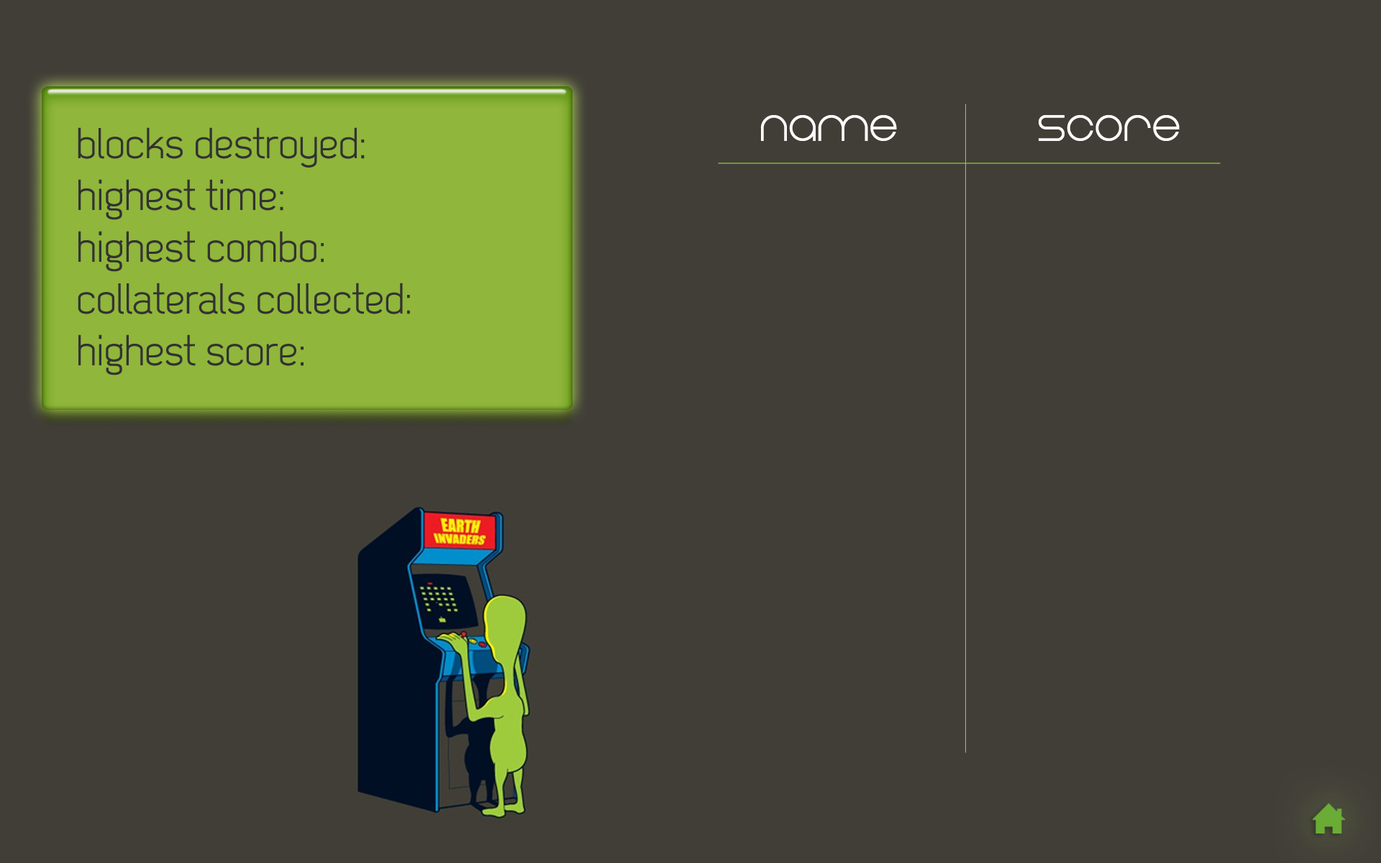
<style>
.page{position:relative;width:1381px;height:863px;background:#413e37}
.page>*{position:absolute;margin:0}
.t1{font:51.8px "EightOne";letter-spacing:-0.005em;color:#fefefe}
.t2{font:43.2px "Dekar";letter-spacing:-0.005em;color:#323232}
</style>
<div class="page">
<p class="t1" style="left:760px;top:115px;width:137px;height:26px">Name</p>
<p class="t1" style="left:1039px;top:115px;width:141px;height:26px">score</p>
<p class="t2" style="left:78px;top:127px;width:332px;height:249px">blocks destroyed:<br>highest time:<br>highest combo:<br>collaterals collected:<br>highest score:</p>
</div>
